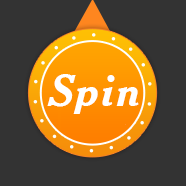
<style>
.page{position:relative;width:186px;height:186px;background:#333333}
.page>*{position:absolute;margin:0}
.t1{font:44px "NYTCheltenham-ExtraBoldItal";letter-spacing:0.06em;color:#ffffff}
</style>
<div class="page">
<p class="t1" style="left:47px;top:74px;width:92px;height:40px">Spin</p>
</div>
